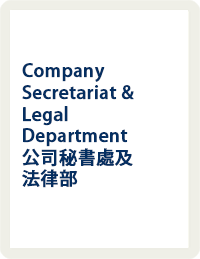
<style>
.page{position:relative;width:200px;height:259px;background:#ffffff}
.page>*{position:absolute;margin:0}
.t1{font:18px "KozGoPr6N-Medium";letter-spacing:0.005em;color:#052f61;font-weight:bold}
</style>
<div class="page">
<p class="t1" style="left:22px;top:63px;width:112px;height:125px">Company Secretariat &amp; Legal <br>Department<br>公司秘書處及<br>法律部</p>
</div>
